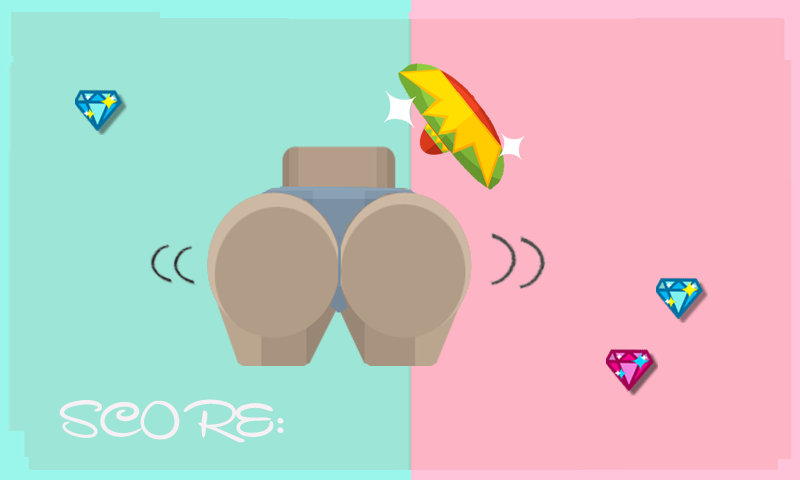
<style>
.page{position:relative;width:800px;height:480px;background:#fdb4c4}
.page>*{position:absolute;margin:0}
.t1{font:52.8px "RemachineScriptPersonalUseOnly";color:#f7f0f4}
</style>
<div class="page">
<p class="t1" style="left:59px;top:399px;width:225px;height:44px">SCORE:</p>
</div>
